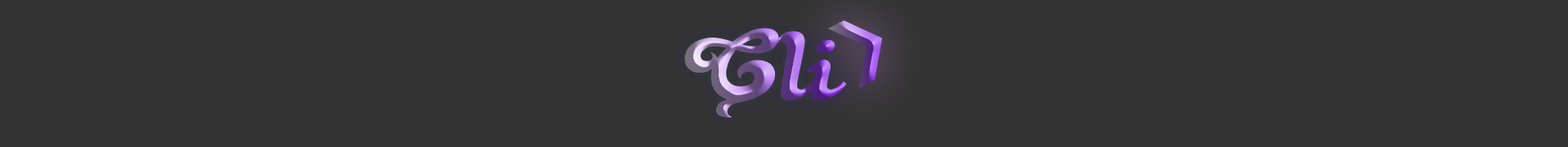
<style>
.page{position:relative;width:1568px;height:147px;background:#333333}
.page>*{position:absolute;margin:0}
.t1{font:108.8px "BlackRose";scale:1.2 1}
.t2{font:67px "DejaVuSans";scale:1.2 1}
</style>
<div class="page">
<p class="t1" style="left:684px;top:28px;width:163px;height:91px">Cli</p>
<p class="t2" style="left:828px;top:20px;width:55px;height:68px;rotate:-27deg">❯</p>
</div>
